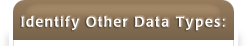
<style>
.page{position:relative;width:247px;height:46px;background:#ffffff}
.page>*{position:absolute;margin:0}
.t1{font:14px "LaudatioC";letter-spacing:0.1em;color:#ffffff}
</style>
<div class="page">
<p class="t1" style="left:21px;top:16px;width:204px;height:15px">Identify Other Data Types:</p>
</div>
